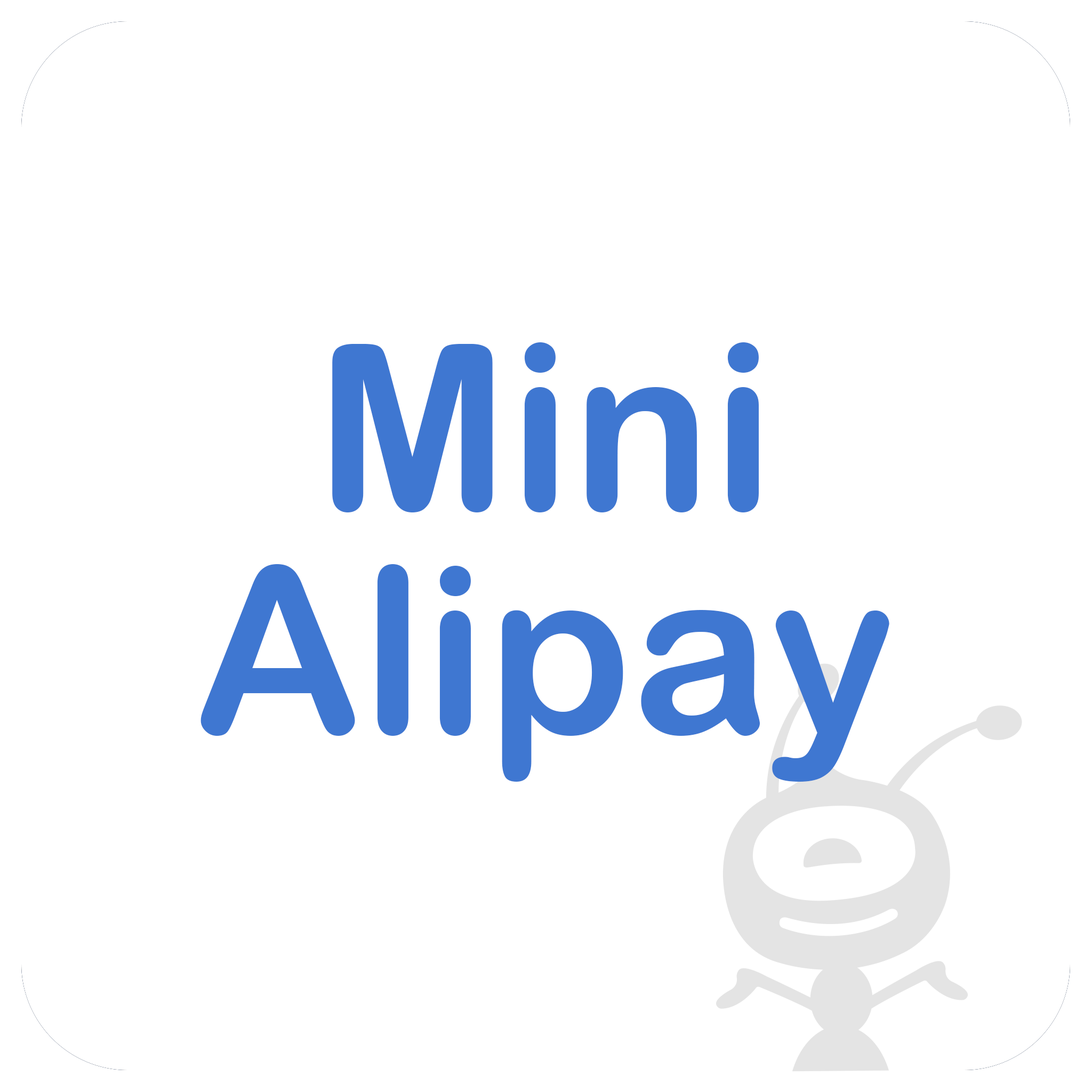
<style>
.page{position:relative;width:1092px;height:1092px;background:#ffffff}
.page>*{position:absolute;margin:0}
.t1{font:231.9px/223.6px "ArialRoundedMTBold";color:#3f77d1}
</style>
<div class="page">
<p class="t1" style="left:200px;top:342px;width:689px;height:440px;text-align:center">Mini<br>Alipay</p>
</div>
